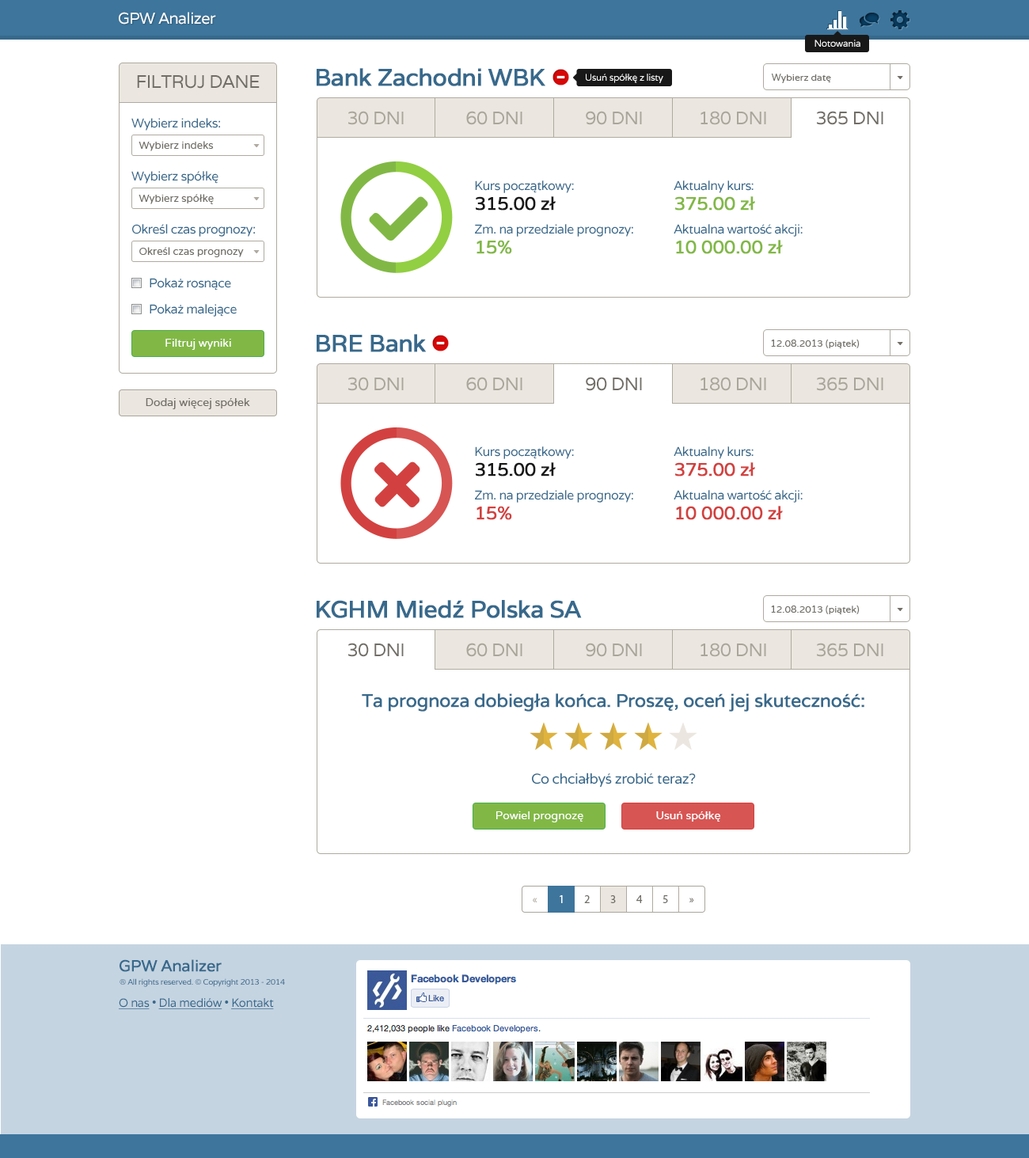
<style>
.page{position:relative;width:1029px;height:1158px;background:#ffffff}
.page>*{position:absolute;margin:0}
.t1{font:15.8px "Varela";letter-spacing:-0.03em;color:#ffffff}
.t2{font:9.5px "Varela";letter-spacing:-0.03em;color:#ffffff}
.t3{font:18.2px "Varela";letter-spacing:-0.03em;color:#716e67}
.t4{font:23.8px "Varela";letter-spacing:-0.03em;color:#37698c;font-weight:bold}
.t5{font:9.5px "Varela";color:#716e67}
.t6{font:18.2px "Varela";letter-spacing:-0.03em;color:#aaa59b}
.t7{font:12.7px "Varela";letter-spacing:-0.03em;color:#37698c}
.t8{font:10.3px "Varela";color:#716e67}
.t9{font:12.7px/23.8px "Varela";letter-spacing:-0.03em;color:#37698c}
.t10{font:12.7px/19.8px "Varela";letter-spacing:-0.03em;color:#37698c}
.t11{font:18.2px/19.8px "Varela";letter-spacing:-0.03em;color:#181818;font-weight:bold}
.t12{font:18.2px/19.8px "Varela";letter-spacing:-0.03em;color:#81b845;font-weight:bold}
.t13{font:11.1px "Varela";color:#ffffff}
.t14{font:11.1px "Varela";color:#716e67}
.t15{font:18.2px/19.8px "Varela";letter-spacing:-0.03em;color:#d2413f;font-weight:bold}
.t16{font:18.2px "Varela";letter-spacing:-0.03em;color:#37698c;font-weight:bold}
.t17{font:14.3px "Varela";letter-spacing:-0.03em;color:#37698c}
.t18{font:11.1px "MyriadPro-Regular";color:#afaaa0}
.t19{font:11.1px "MyriadPro-Regular";color:#ffffff}
.t20{font:11.1px "MyriadPro-Regular";color:#716e67}
.t21{font:15.8px "Varela";letter-spacing:-0.03em;color:#37698c;font-weight:bold}
.t22{font:7.9px "Varela";letter-spacing:-0.03em;color:#37698c}
.t23{font:11.9px "Varela";letter-spacing:-0.03em;color:#37698c;text-decoration:underline}
.t24{font:11.9px "Varela";letter-spacing:-0.03em;color:#37698c}
</style>
<div class="page">
<p class="t1" style="left:119px;top:12px;width:97px;height:13px">GPW Analizer</p>
<p class="t2" style="left:815px;top:40px;width:46px;height:7px">Notowania</p>
<p class="t3" style="left:137px;top:75px;width:123px;height:14px">FILTRUJ DANE</p>
<p class="t4" style="left:317px;top:68px;width:229px;height:18px">Bank Zachodni WBK</p>
<p class="t2" style="left:586px;top:74px;width:78px;height:9px">Usuń spółkę z listy</p>
<p class="t5" style="left:771px;top:74px;width:60px;height:9px">Wybierz datę</p>
<p class="t6" style="left:348px;top:111px;width:56px;height:14px">30 DNI</p>
<p class="t6" style="left:466px;top:111px;width:57px;height:14px">60 DNI</p>
<p class="t6" style="left:586px;top:111px;width:56px;height:14px">90 DNI</p>
<p class="t6" style="left:701px;top:111px;width:65px;height:14px">180 DNI</p>
<p class="t3" style="left:817px;top:111px;width:67px;height:14px">365 DNI</p>
<p class="t7" style="left:131px;top:118px;width:89px;height:13px">Wybierz indeks:</p>
<p class="t8" style="left:139px;top:141px;width:75px;height:10px">Wybierz indeks</p>
<p class="t7" style="left:131px;top:171px;width:88px;height:13px">Wybierz spółkę</p>
<p class="t9" style="left:475px;top:181px;width:328px;height:73px"><span class="t10">Kurs początkowy:     Aktualny kurs: <br></span><span class="t11">315.00 zł     </span><span class="t12">375.00 zł<br></span>Zm. na przedziale prognozy:  Aktualna wartość akcji:<br><span class="t12">15%      10 000.00 zł</span></p>
<p class="t8" style="left:139px;top:194px;width:75px;height:10px">Wybierz spółkę</p>
<p class="t7" style="left:132px;top:224px;width:123px;height:13px">Określ czas prognozy:</p>
<p class="t8" style="left:139px;top:247px;width:105px;height:10px">Określ czas prognozy</p>
<p class="t7" style="left:150px;top:278px;width:81px;height:13px">Pokaż rosnące</p>
<p class="t7" style="left:150px;top:304px;width:87px;height:13px">Pokaż malejące</p>
<p class="t13" style="left:165px;top:339px;width:66px;height:11px">Filtruj wyniki</p>
<p class="t4" style="left:317px;top:334px;width:109px;height:18px">BRE Bank</p>
<p class="t5" style="left:771px;top:339px;width:89px;height:9px">12.08.2013 (piątek)</p>
<p class="t6" style="left:348px;top:377px;width:56px;height:14px">30 DNI</p>
<p class="t6" style="left:466px;top:377px;width:57px;height:14px">60 DNI</p>
<p class="t3" style="left:586px;top:377px;width:56px;height:14px">90 DNI</p>
<p class="t6" style="left:701px;top:377px;width:65px;height:14px">180 DNI</p>
<p class="t6" style="left:817px;top:377px;width:67px;height:14px">365 DNI</p>
<p class="t14" style="left:146px;top:398px;width:104px;height:11px">Dodaj więcej spółek</p>
<p class="t9" style="left:475px;top:447px;width:328px;height:73px"><span class="t10">Kurs początkowy:     Aktualny kurs: <br></span><span class="t11">315.00 zł     </span><span class="t15">375.00 zł<br></span>Zm. na przedziale prognozy:  Aktualna wartość akcji:<br><span class="t15">15%      10 000.00 zł</span></p>
<p class="t4" style="left:317px;top:600px;width:265px;height:18px">KGHM Miedź Polska SA</p>
<p class="t5" style="left:771px;top:605px;width:89px;height:9px">12.08.2013 (piątek)</p>
<p class="t3" style="left:348px;top:643px;width:56px;height:14px">30 DNI</p>
<p class="t6" style="left:466px;top:643px;width:57px;height:14px">60 DNI</p>
<p class="t6" style="left:586px;top:643px;width:56px;height:14px">90 DNI</p>
<p class="t6" style="left:701px;top:643px;width:65px;height:14px">180 DNI</p>
<p class="t6" style="left:817px;top:643px;width:67px;height:14px">365 DNI</p>
<p class="t16" style="left:362px;top:694px;width:503px;height:18px">Ta prognoza dobiegła końca. Proszę, oceń jej skuteczność:</p>
<p class="t17" style="left:532px;top:773px;width:164px;height:14px">Co chciałbyś zrobić teraz?</p>
<p class="t13" style="left:496px;top:812px;width:88px;height:11px">Powiel prognozę</p>
<p class="t13" style="left:656px;top:812px;width:65px;height:10px">Usuń spółkę</p>
<p class="t18" style="left:533px;top:898px;width:5px;height:5px">«</p>
<p class="t19" style="left:560px;top:896px;width:3px;height:7px">1</p>
<p class="t20" style="left:584px;top:896px;width:6px;height:7px">2</p>
<p class="t20" style="left:610px;top:896px;width:6px;height:7px">3</p>
<p class="t20" style="left:637px;top:896px;width:6px;height:7px">4</p>
<p class="t20" style="left:663px;top:896px;width:5px;height:7px">5</p>
<p class="t20" style="left:690px;top:898px;width:4px;height:5px">»</p>
<p class="t21" style="left:120px;top:960px;width:102px;height:12px">GPW Analizer</p>
<p class="t22" style="left:120px;top:979px;width:165px;height:8px">® All rights reserved. © Copyright 2013 - 2014</p>
<p class="t23" style="left:119px;top:998px;width:155px;height:12px">O nas<span class="t24"> • </span>Dla mediów<span class="t24"> • </span>Kontakt</p>
</div>
